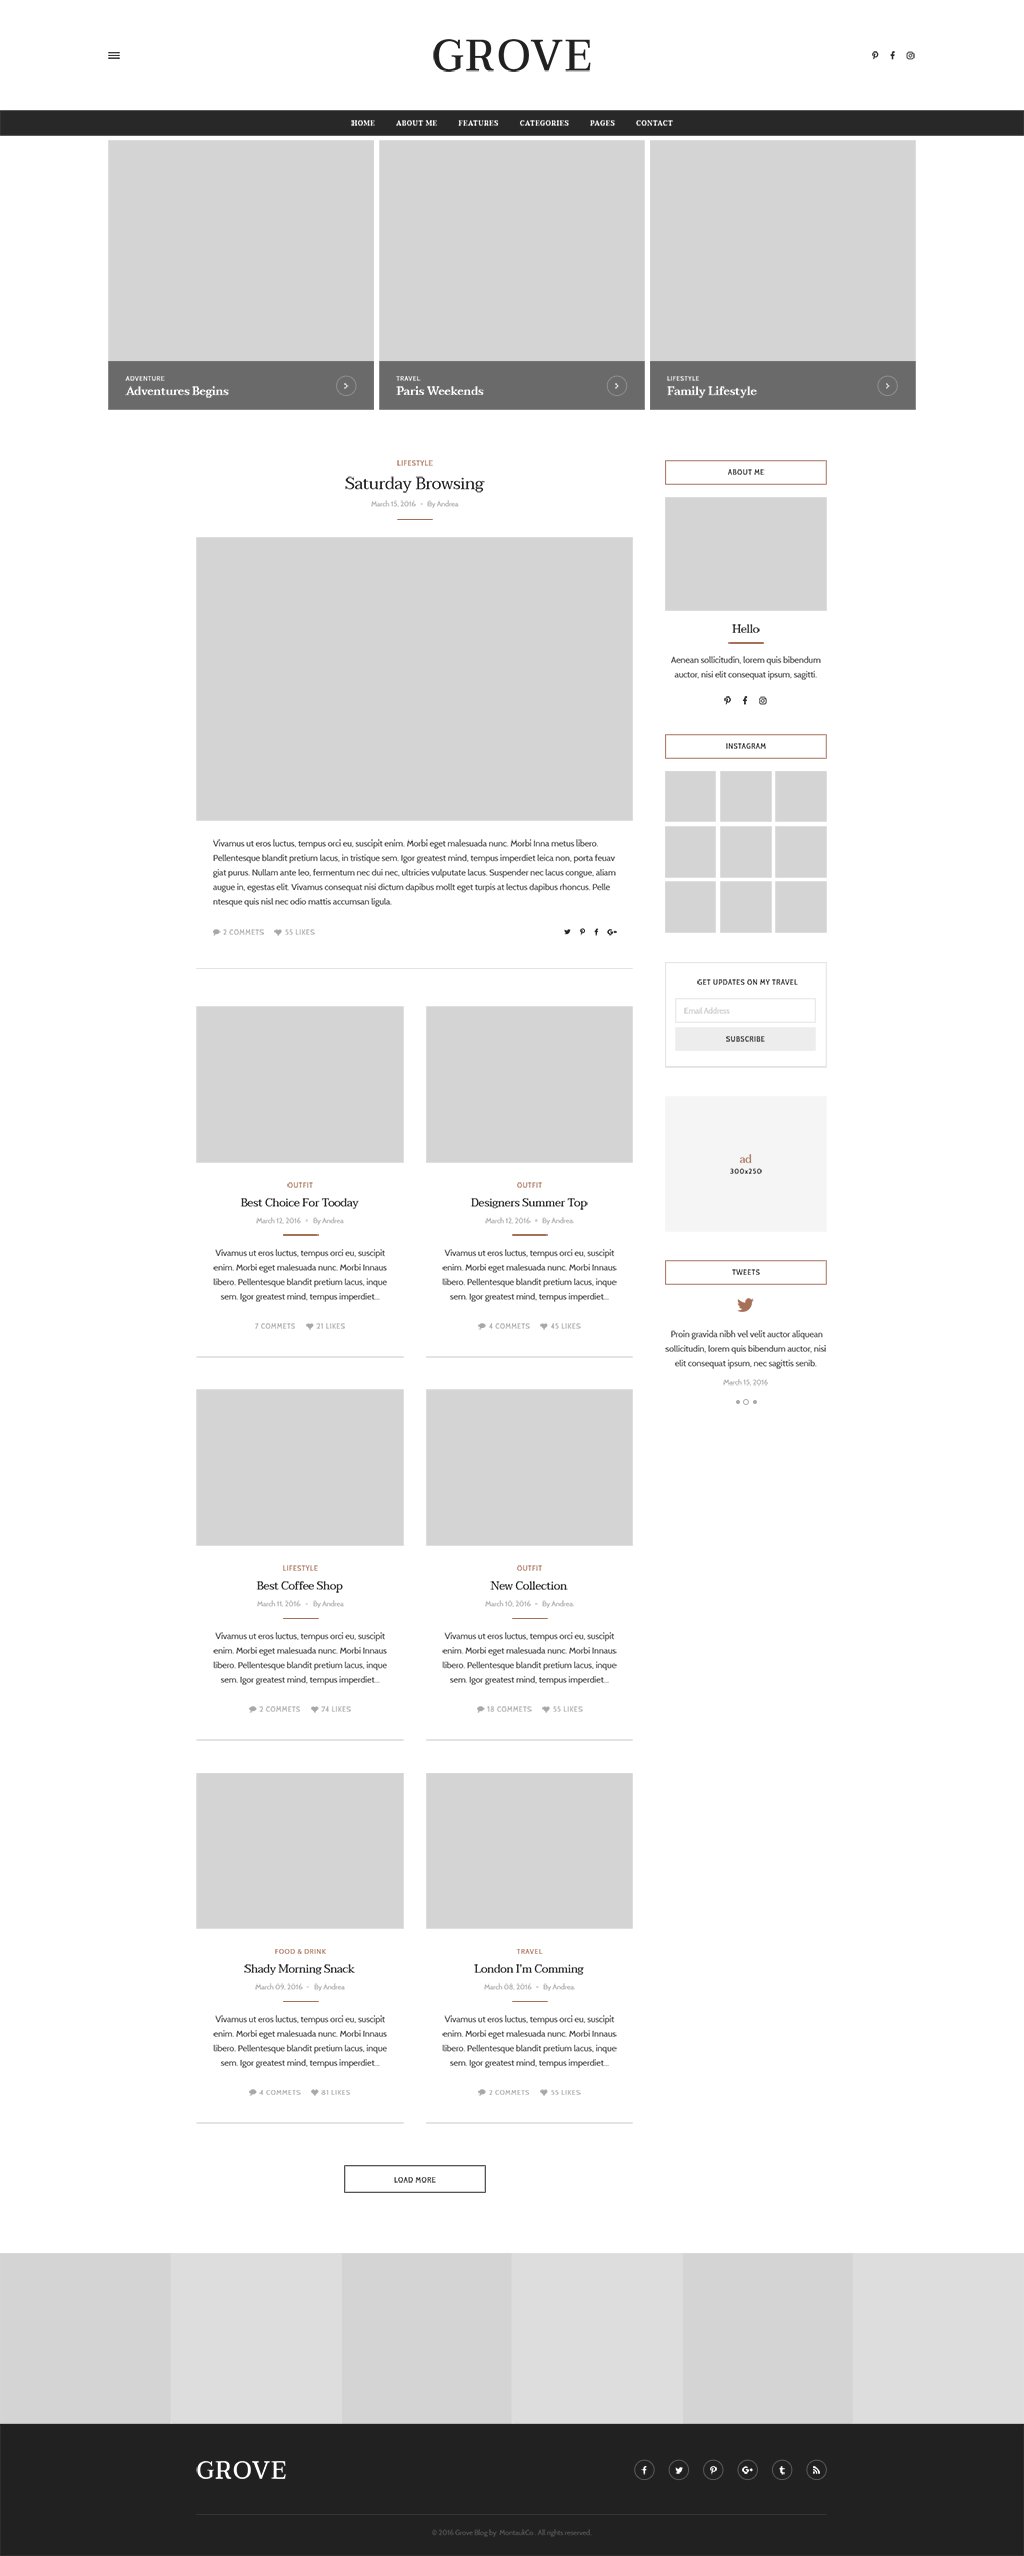
<style>
.page{position:relative;width:1024px;height:2556px;background:#ffffff}
.page>*{position:absolute;margin:0}
.t1{font:43px "Taviraj-Medium";letter-spacing:0.05em;color:#212121;text-transform:uppercase}
.t2{font:6.5px "Taviraj-SemiBold";letter-spacing:0.1em;color:#ffffff;text-transform:uppercase}
.t3{font:5.9px "Cabin-Regular";letter-spacing:0.1em;color:#ffffff;text-transform:uppercase}
.t4{font:5.9px "Cabin-Regular";letter-spacing:0.1em;text-transform:uppercase}
.t5{font:11.3px "Taviraj-SemiBold";letter-spacing:-0.02em;color:#ffffff}
.t6{font:6.5px "Cabin-Regular";letter-spacing:0.1em;text-transform:uppercase}
.t7{font:6.5px "Cabin-Regular";letter-spacing:0.1em;color:#212121;text-transform:uppercase}
.t8{font:16.7px "Taviraj-Regular";letter-spacing:-0.02em;color:#212121}
.t9{font:7px "Cabin-Regular";color:#aaaaaa}
.t10{font:11.3px "Taviraj-Regular";letter-spacing:-0.02em;color:#212121}
.t11{font:8.6px/14.5px "Cabin-Regular";color:#424242}
.t12{font:6.5px "Cabin-Regular";letter-spacing:0.1em;color:#a8a8a8;text-transform:uppercase}
.t13{font:7.5px "Cabin-Regular";color:#c9c9c9}
.t14{font:6.5px/10.8px "Cabin-Regular";letter-spacing:0.1em;color:#212121}
.t15{font:11.3px/10.8px "Taviraj-Regular";letter-spacing:-0.02em;color:#a77158}
.t16{font:6.5px "Cabin-Regular";letter-spacing:0.1em;color:#a77158;text-transform:uppercase}
.t17{font:24.2px "Taviraj-Medium";letter-spacing:0.05em;color:#ffffff;text-transform:uppercase}
.t18{font:7px "Cabin-Regular";color:#555555}
</style>
<div class="page">
<p class="t1" style="left:433px;top:39px;width:158px;height:33px">Grove</p>
<p class="t2" style="left:351px;top:120px;width:322px;height:6px">Home         About Me         Features         Categories         Pages         Contact</p>
<p class="t3" style="left:125px;top:376px;width:40px;height:5px">Adventure</p>
<p class="t3" style="left:396px;top:376px;width:25px;height:5px">Travel</p>
<p class="t4" style="left:667px;top:376px;width:32px;height:5px">Lifestyle</p>
<p class="t5" style="left:125px;top:386px;width:104px;height:12px">Adventures Begins</p>
<p class="t5" style="left:396px;top:386px;width:88px;height:9px">Paris Weekends</p>
<p class="t5" style="left:667px;top:386px;width:90px;height:12px">Family Lifestyle</p>
<p class="t6" style="left:397px;top:460px;width:36px;height:6px">Lifestyle</p>
<p class="t7" style="left:728px;top:469px;width:37px;height:6px">About Me</p>
<p class="t8" style="left:345px;top:476px;width:140px;height:17px">Saturday Browsing</p>
<p class="t9" style="left:371px;top:500px;width:45px;height:7px">March 15, 2016</p>
<p class="t9" style="left:427px;top:500px;width:32px;height:8px">By Andrea</p>
<p class="t10" style="left:732px;top:624px;width:28px;height:9px">Hello</p>
<p class="t11" style="left:671px;top:656px;width:150px;height:24px;text-align:center">Aenean sollicitudin, lorem quis bibendum auctor, nisi elit consequat ipsum, sagitti.</p>
<p class="t7" style="left:726px;top:743px;width:40px;height:6px">Instagram</p>
<p class="t11" style="left:213px;top:839px;width:403px;height:68px">Vivamus ut eros luctus, tempus orci eu, suscipit enim. Morbi eget malesuada nunc. Morbi Inna metus libero. Pellentesque blandit pretium lacus, in tristique sem. Igor greatest mind, tempus imperdiet leica non, porta feuav giat purus. Nullam ante leo, fermentum nec dui nec, ultricies vulputate lacus. Suspender nec lacus congue, aliam augue in, egestas elit. Vivamus consequat nisi dictum dapibus mollt eget turpis at lectus dapibus rhoncus. Pelle ntesque quis nisl nec odio mattis accumsan ligula.</p>
<p class="t12" style="left:223px;top:929px;width:41px;height:6px">2 Commets</p>
<p class="t12" style="left:285px;top:929px;width:30px;height:6px">55 Likes</p>
<p class="t7" style="left:697px;top:979px;width:101px;height:6px">Get updates on my travel</p>
<p class="t13" style="left:684px;top:1007px;width:46px;height:7px">Email Address</p>
<p class="t6" style="left:726px;top:1036px;width:39px;height:6px">Subscribe</p>
<p class="t14" style="left:730px;top:1154px;width:32px;height:20px;text-align:center"><span class="t15">ad<br></span>300x250</p>
<p class="t6" style="left:287px;top:1182px;width:26px;height:6px">Outfit</p>
<p class="t6" style="left:517px;top:1182px;width:25px;height:6px">Outfit</p>
<p class="t10" style="left:240px;top:1198px;width:119px;height:11px">Best Choice For Tooday</p>
<p class="t10" style="left:470px;top:1198px;width:118px;height:12px">Designers Summer Top</p>
<p class="t9" style="left:256px;top:1217px;width:45px;height:7px">March 12, 2016</p>
<p class="t9" style="left:313px;top:1217px;width:31px;height:8px">By Andrea</p>
<p class="t9" style="left:485px;top:1217px;width:46px;height:7px">March 12, 2016</p>
<p class="t9" style="left:542px;top:1217px;width:32px;height:8px">By Andrea</p>
<p class="t11" style="left:213px;top:1249px;width:174px;height:53px;text-align:center">Vivamus ut eros luctus, tempus orci eu, suscipit enim. Morbi eget malesuada nunc. Morbi Innaus libero. Pellentesque blandit pretium lacus, inque sem. Igor greatest mind, tempus imperdiet...</p>
<p class="t11" style="left:442px;top:1249px;width:175px;height:53px;text-align:center">Vivamus ut eros luctus, tempus orci eu, suscipit enim. Morbi eget malesuada nunc. Morbi Innaus libero. Pellentesque blandit pretium lacus, inque sem. Igor greatest mind, tempus imperdiet...</p>
<p class="t6" style="left:732px;top:1269px;width:28px;height:6px">Tweets</p>
<p class="t12" style="left:255px;top:1323px;width:40px;height:6px">7 Commets</p>
<p class="t12" style="left:316px;top:1323px;width:29px;height:6px">21 Likes</p>
<p class="t12" style="left:489px;top:1323px;width:41px;height:6px">4 Commets</p>
<p class="t12" style="left:551px;top:1323px;width:30px;height:6px">45 Likes</p>
<p class="t11" style="left:665px;top:1330px;width:161px;height:39px;text-align:center">Proin gravida nibh vel velit auctor aliquean sollicitudin, lorem quis bibendum auctor, nisi elit consequat ipsum, nec sagittis senib.</p>
<p class="t9" style="left:723px;top:1379px;width:45px;height:7px">March 15, 2016</p>
<p class="t16" style="left:283px;top:1565px;width:35px;height:6px">Lifestyle</p>
<p class="t6" style="left:517px;top:1565px;width:25px;height:6px">Outfit</p>
<p class="t10" style="left:256px;top:1581px;width:87px;height:12px">Best Coffee Shop</p>
<p class="t10" style="left:490px;top:1581px;width:78px;height:9px">New Collection</p>
<p class="t9" style="left:257px;top:1600px;width:44px;height:7px">March 11, 2016</p>
<p class="t9" style="left:313px;top:1600px;width:31px;height:8px">By Andrea</p>
<p class="t9" style="left:485px;top:1600px;width:46px;height:7px">March 10, 2016</p>
<p class="t9" style="left:542px;top:1600px;width:32px;height:8px">By Andrea</p>
<p class="t11" style="left:213px;top:1632px;width:174px;height:53px;text-align:center">Vivamus ut eros luctus, tempus orci eu, suscipit enim. Morbi eget malesuada nunc. Morbi Innaus libero. Pellentesque blandit pretium lacus, inque sem. Igor greatest mind, tempus imperdiet...</p>
<p class="t11" style="left:442px;top:1632px;width:175px;height:53px;text-align:center">Vivamus ut eros luctus, tempus orci eu, suscipit enim. Morbi eget malesuada nunc. Morbi Innaus libero. Pellentesque blandit pretium lacus, inque sem. Igor greatest mind, tempus imperdiet...</p>
<p class="t12" style="left:259px;top:1706px;width:41px;height:6px">2 Commets</p>
<p class="t12" style="left:321px;top:1706px;width:30px;height:6px">74 Likes</p>
<p class="t12" style="left:487px;top:1706px;width:45px;height:6px">18 Commets</p>
<p class="t12" style="left:553px;top:1706px;width:30px;height:6px">55 Likes</p>
<p class="t16" style="left:275px;top:1949px;width:51px;height:5px">Food &amp; Drink</p>
<p class="t16" style="left:516px;top:1949px;width:27px;height:5px">Travel</p>
<p class="t10" style="left:244px;top:1964px;width:111px;height:11px">Shady Morning Snack</p>
<p class="t10" style="left:474px;top:1964px;width:110px;height:11px">London I’m Comming</p>
<p class="t9" style="left:255px;top:1983px;width:48px;height:7px">March 09, 2016</p>
<p class="t9" style="left:314px;top:1983px;width:31px;height:8px">By Andrea</p>
<p class="t9" style="left:484px;top:1983px;width:48px;height:7px">March 08, 2016</p>
<p class="t9" style="left:543px;top:1983px;width:32px;height:8px">By Andrea</p>
<p class="t11" style="left:213px;top:2015px;width:174px;height:53px;text-align:center">Vivamus ut eros luctus, tempus orci eu, suscipit enim. Morbi eget malesuada nunc. Morbi Innaus libero. Pellentesque blandit pretium lacus, inque sem. Igor greatest mind, tempus imperdiet...</p>
<p class="t11" style="left:442px;top:2015px;width:175px;height:53px;text-align:center">Vivamus ut eros luctus, tempus orci eu, suscipit enim. Morbi eget malesuada nunc. Morbi Innaus libero. Pellentesque blandit pretium lacus, inque sem. Igor greatest mind, tempus imperdiet...</p>
<p class="t12" style="left:259px;top:2090px;width:42px;height:5px">4 Commets</p>
<p class="t12" style="left:321px;top:2090px;width:29px;height:5px">81 Likes</p>
<p class="t12" style="left:489px;top:2090px;width:40px;height:5px">2 Commets</p>
<p class="t12" style="left:551px;top:2090px;width:30px;height:5px">55 Likes</p>
<p class="t7" style="left:394px;top:2177px;width:42px;height:6px">Load More</p>
<p class="t17" style="left:196px;top:2461px;width:90px;height:18px">Grove</p>
<p class="t18" style="left:432px;top:2529px;width:160px;height:8px">© 2016 Grove Blog by  MontaukCo . All rights reserved.</p>
</div>
